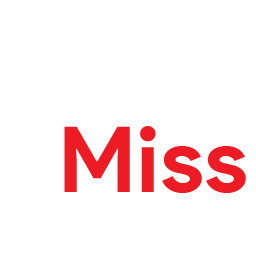
<style>
.page{position:relative;width:256px;height:256px;background:#ffffff}
.page>*{position:absolute;margin:0}
.t1{font:91.3px "ProductSans-Bold";color:#ed1c24}
</style>
<div class="page">
<p class="t1" style="left:64px;top:126px;width:182px;height:67px">Miss</p>
</div>
